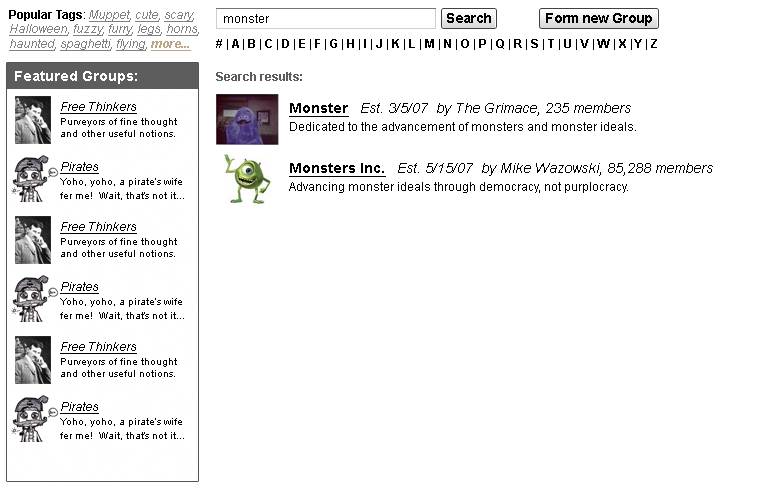
<style>
.page{position:relative;width:760px;height:493px;background:#ffffff}
.page>*{position:absolute;margin:0}
.t1{font:12px "Arial-BoldMT";color:#000000}
.t2{font:12px "ArialMT";color:#000000}
.t3{font:12px "Arial-ItalicMT";color:#808080;text-decoration:underline}
.t4{font:12px "Arial-ItalicMT";color:#808080}
.t5{font:12px "Arial-BoldItalicMT";color:#b9a682;text-decoration:underline}
.t6{font:14px "Arial-BoldMT";letter-spacing:-0.05em;color:#000000}
.t7{font:14px "Arial-BoldMT";color:#ffffff}
.t8{font:12px "Arial-BoldMT";color:#5d5d5d}
.t9{font:10px "ArialMT";color:#000000}
.t10{font:12px "Arial-ItalicMT";color:#000000;text-decoration:underline}
.t11{font:12px/14px "Arial-ItalicMT";color:#000000;text-decoration:underline}
.t12{font:10px/14px "ArialMT";color:#000000}
.t13{font:14px "Arial-BoldMT";color:#000000;text-decoration:underline}
.t14{font:14px "Arial-ItalicMT";color:#000000}
.t15{font:14px/18px "Arial-ItalicMT";color:#000000}
.t16{font:12px/18px "ArialMT";color:#000000}
</style>
<div class="page">
<p class="t1" style="left:9px;top:10px;width:190px;height:41px">Popular Tags<span class="t2">: </span><span class="t3">Muppet</span><span class="t4">, </span><span class="t3">cute</span><span class="t4">, </span><span class="t3">scary</span><span class="t4">,<br></span><span class="t3">Halloween</span><span class="t4">, </span><span class="t3">fuzzy</span><span class="t4">, </span><span class="t3">furry</span><span class="t4">, </span><span class="t3">legs</span><span class="t4">, </span><span class="t3">horns</span><span class="t4">,<br></span><span class="t3">haunted</span><span class="t4">, </span><span class="t3">spaghetti</span><span class="t4">, </span><span class="t3">flying</span><span class="t4">, </span><span class="t5">more...</span></p>
<p class="t2" style="left:224px;top:14px;width:45px;height:9px">monster</p>
<p class="t6" style="left:447px;top:13px;width:44px;height:10px">Search</p>
<p class="t6" style="left:546px;top:13px;width:106px;height:13px">Form new Group</p>
<p class="t1" style="left:216px;top:39px;width:441px;height:11px"># | A | B | C | D | E | F | G | H | I | J | K | L | M | N | O | P | Q | R | S | T | U | V | W | X | Y | Z</p>
<p class="t7" style="left:15px;top:71px;width:122px;height:13px">Featured Groups:</p>
<p class="t8" style="left:216px;top:72px;width:86px;height:9px">Search results:</p>
<p class="t9" style="left:60px;top:102px;width:117px;height:35px"><span class="t10">Fre</span><span class="t11">e Thinkers<br></span><span class="t12">Purveyor</span>s of fine thought<br>and other useful notions.</p>
<p class="t2" style="left:289px;top:103px;width:347px;height:28px"><span class="t13">Monster   </span><span class="t14">Est. 3</span><span class="t15">/5/07  by The Grimace, 235 members<br></span><span class="t16">Dedicated to the advan</span>cement of monsters and monster ideals.</p>
<p class="t12" style="left:60px;top:162px;width:124px;height:38px"><span class="t10">Pirates<br></span>Yoho, yoho, a pirate’s wife<br>fer me!  Wait, that’s not it...</p>
<p class="t16" style="left:289px;top:163px;width:424px;height:30px"><span class="t13">Monsters Inc.   </span><span class="t14">Est. 5/15</span><span class="t15">/07  by Mike Wazowski, 85,288 members<br></span>Advancing monster ideals through democracy, not purplocracy.</p>
<p class="t9" style="left:60px;top:222px;width:117px;height:35px"><span class="t10">Fre</span><span class="t11">e Thinkers<br></span><span class="t12">Purveyor</span>s of fine thought<br>and other useful notions.</p>
<p class="t12" style="left:60px;top:282px;width:124px;height:38px"><span class="t10">Pirates<br></span>Yoho, yoho, a pirate’s wife<br>fer me!  Wait, that’s not it...</p>
<p class="t9" style="left:60px;top:342px;width:117px;height:35px"><span class="t10">Fre</span><span class="t11">e Thinkers<br></span><span class="t12">Purveyor</span>s of fine thought<br>and other useful notions.</p>
<p class="t12" style="left:60px;top:402px;width:124px;height:38px"><span class="t10">Pirates<br></span>Yoho, yoho, a pirate’s wife<br>fer me!  Wait, that’s not it...</p>
</div>
